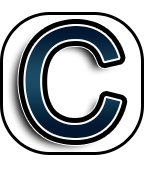
<style>
.page{position:relative;width:144px;height:169px;background:#ffffff}
.page>*{position:absolute;margin:0}
.t1{font:150px "ArialMT";color:#06213b}
</style>
<div class="page">
<p class="t1" style="left:25px;top:26px;width:96px;height:112px">C</p>
</div>
